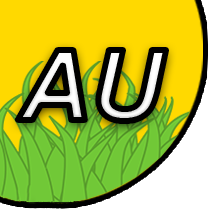
<style>
.page{position:relative;width:209px;height:209px;background:#ffd900}
.page>*{position:absolute;margin:0}
.t1{font:98.1px "Arial-BoldItalicMT"}
</style>
<div class="page">
<p class="t1" style="left:17px;top:50px;width:149px;height:71px">AU</p>
</div>
